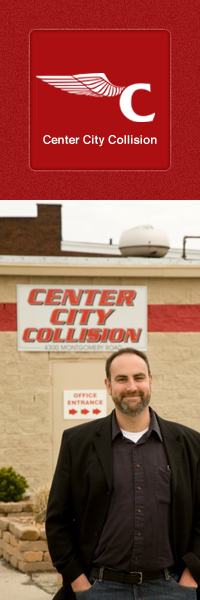
<style>
.page{position:relative;width:200px;height:600px}
.page>*{position:absolute;margin:0}
.t1{font:20px "Helvetica-Bold";color:#ffffff}
</style>
<div class="page">
<p class="t1" style="left:43px;top:135px;width:114px;height:12px">Center City Collision</p>
</div>
